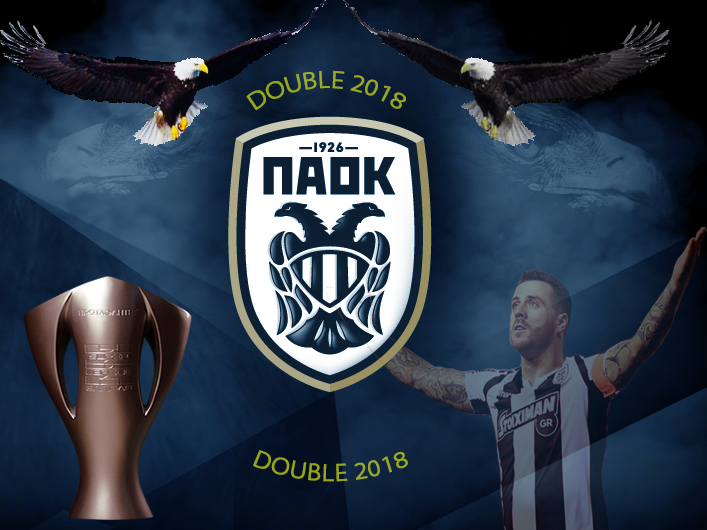
<style>
.page{position:relative;width:707px;height:530px}
.page>*{position:absolute;margin:0}
.t1{font:24px "MyriadPro-Regular";color:#98a81e}
.t2{font:24px "MyriadPro-Regular";color:#98a615}
</style>
<div class="page">
<p class="t1" style="left:246px;top:70px;width:160px;height:41px;text-align:center">DOUBLE 2018</p>
<p class="t2" style="left:253px;top:450px;width:155px;height:32px">DOUBLE 2018</p>
</div>
